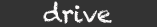
<style>
.page{position:relative;width:157px;height:27px;background:#333333}
.page>*{position:absolute;margin:0}
.t1{font:24px "Chalkduster";letter-spacing:-0.02em;color:#fcfafa}
</style>
<div class="page">
<p class="t1" style="left:43px;top:1px;width:69px;height:23px">drive</p>
</div>
